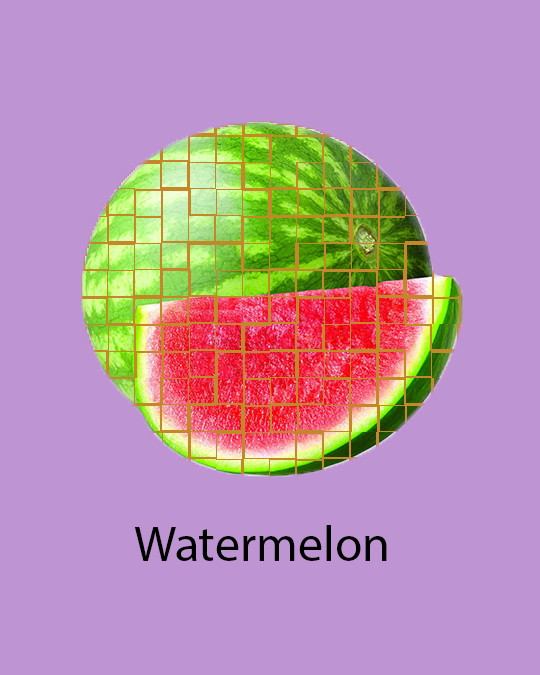
<style>
.page{position:relative;width:540px;height:675px;background:#be94d2}
.page>*{position:absolute;margin:0}
.t1{font:50px "MyriadPro-Regular";color:#000000}
</style>
<div class="page">
<p class="t1" style="left:134px;top:525px;width:253px;height:36px">Watermelon</p>
</div>
